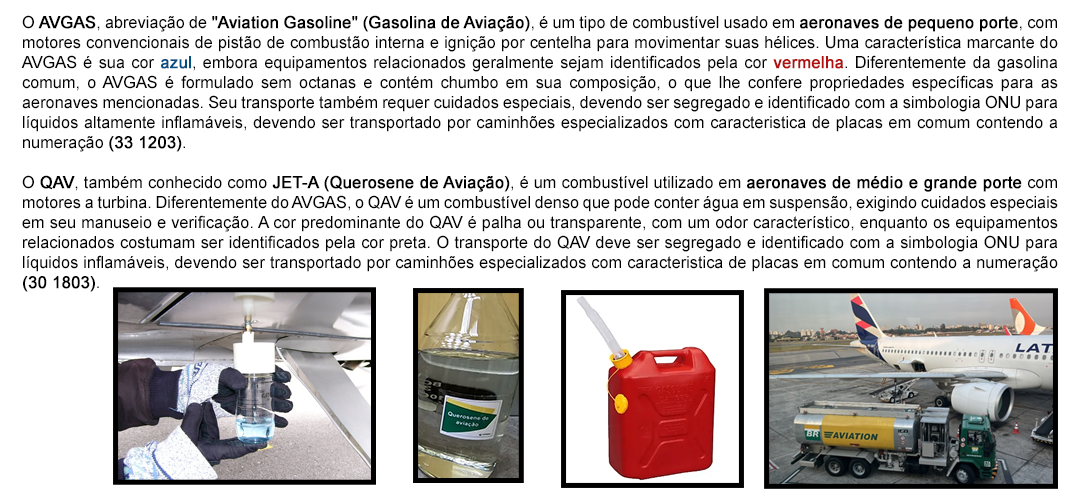
<style>
.page{position:relative;width:1080px;height:500px;background:#ffffff}
.page>*{position:absolute;margin:0}
.t1{font:16.7px "ArialMT";color:#000000}
.t2{font:16.7px "ArialMT";color:#000000;font-weight:bold}
.t3{font:16.7px "ArialMT";color:#014f84;font-weight:bold}
.t4{font:16.7px "ArialMT";color:#b00f0e;font-weight:bold}
</style>
<div class="page">
<p class="t1" style="left:21px;top:15px;width:1037px;height:277px;text-align:justify">O <span class="t2">AVGAS</span>, abreviação de <span class="t2">"Aviation Gasoline" (Gasolina de Aviação)</span>, é um tipo de combustível usado em <span class="t2">aeronaves de pequeno porte</span>, com motores convencionais de pistão de combustão interna e ignição por centelha para movimentar suas hélices. Uma característica marcante do AVGAS é sua cor <span class="t3">azul</span>, embora equipamentos relacionados geralmente sejam identificados pela cor <span class="t4">vermelha</span>. Diferentemente da gasolina comum, o AVGAS é formulado sem octanas e contém chumbo em sua composição, o que lhe confere propriedades específicas para as aeronaves mencionadas. Seu transporte também requer cuidados especiais, devendo ser segregado e identificado com a simbologia ONU para líquidos altamente inflamáveis, devendo ser transportado por caminhões especializados com caracteristica de placas em comum contendo a numeração <span class="t2">(33 1203)</span>.<br><br>O <span class="t2">QAV</span>, também conhecido como <span class="t2">JET-A (Querosene de Aviação)</span>, é um combustível utilizado em <span class="t2">aeronaves de médio e grande porte</span> com motores a turbina. Diferentemente do AVGAS, o QAV é um combustível denso que pode conter água em suspensão, exigindo cuidados especiais em seu manuseio e verificação. A cor predominante do QAV é palha ou transparente, com um odor característico, enquanto os equipamentos relacionados costumam ser identificados pela cor preta. O transporte do QAV deve ser segregado e identificado com a simbologia ONU para líquidos inflamáveis, devendo ser transportado por caminhões especializados com caracteristica de placas em comum contendo a numeração <span class="t2">(30 1803)</span>.</p>
</div>
